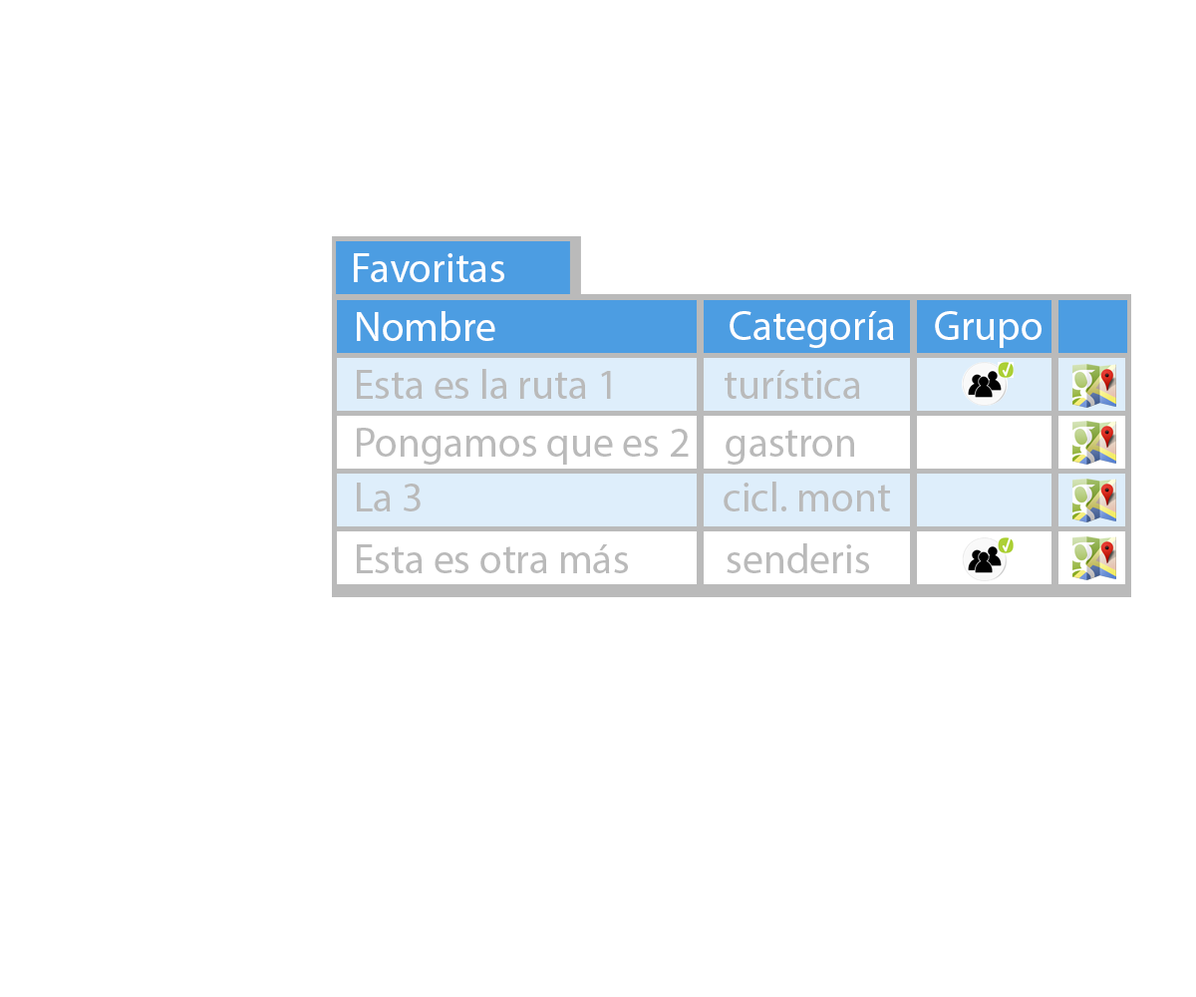
<style>
.page{position:relative;width:1196px;height:997px;background:#ffffff}
.page>*{position:absolute;margin:0}
.t1{font:41.5px "MyriadPro-Regular";color:#ffffff}
.t2{font:41.5px "MyriadPro-Regular";color:#bababa}
</style>
<div class="page">
<p class="t1" style="left:354px;top:253px;width:150px;height:29px">Favoritas</p>
<p class="t1" style="left:357px;top:311px;width:138px;height:30px">Nombre</p>
<p class="t1" style="left:730px;top:311px;width:164px;height:37px">Categoría</p>
<p class="t1" style="left:935px;top:311px;width:107px;height:37px">Grupo</p>
<p class="t2" style="left:357px;top:369px;width:503px;height:30px">Esta es la ruta 1            turística</p>
<p class="t2" style="left:357px;top:428px;width:497px;height:37px">Pongamos que es 2    gastron</p>
<p class="t2" style="left:357px;top:481px;width:533px;height:30px">La 3                                  cicl. mont</p>
<p class="t2" style="left:357px;top:543px;width:512px;height:30px">Esta es otra más           senderis</p>
</div>
